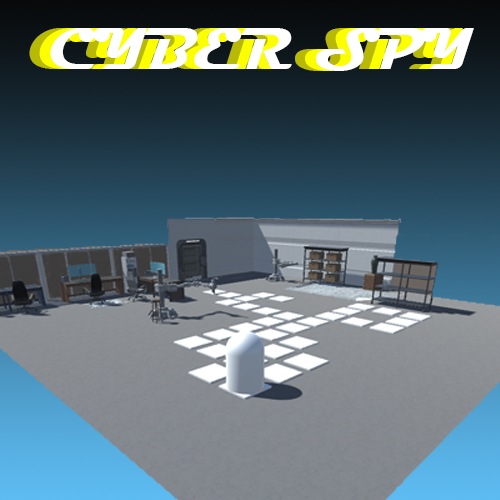
<style>
.page{position:relative;width:500px;height:500px}
.page>*{position:absolute;margin:0}
.t1{font:60px "Magneto-Bold"}
.t2{font:60px "Magneto-Bold";color:#ffffff}
</style>
<div class="page">
<p class="t1" style="left:29px;top:28px;width:424px;height:43px">CYBER SPY</p>
<p class="t1" style="left:39px;top:28px;width:424px;height:43px">CYBER SPY</p>
<p class="t2" style="left:50px;top:28px;width:424px;height:43px">CYBER SPY</p>
</div>
